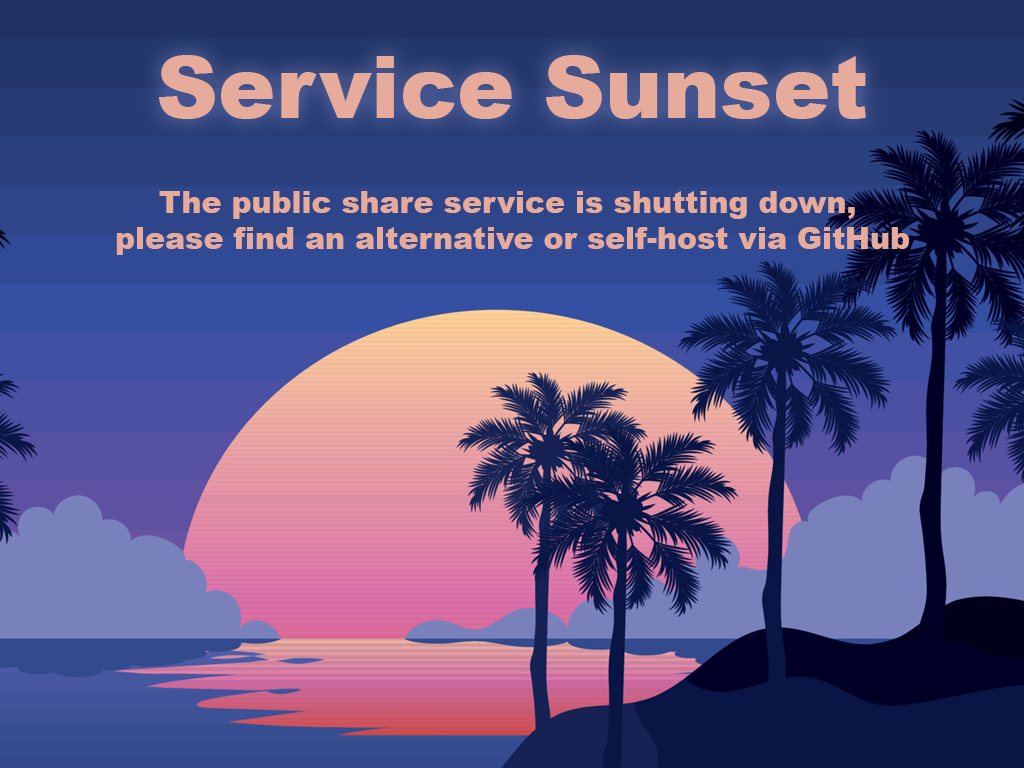
<style>
.page{position:relative;width:1024px;height:768px}
.page>*{position:absolute;margin:0}
.t1{font:86px "Arial-Black";color:#e6ab9a}
.t2{font:30px "Arial-Black";color:#e6ab9a}
</style>
<div class="page">
<p class="t1" style="left:159px;top:55px;width:707px;height:64px">Service Sunset</p>
<p class="t2" style="left:116px;top:191px;width:793px;height:64px;text-align:center">The public share service is shutting down, <br>please find an alternative or self-host via GitHub</p>
</div>
